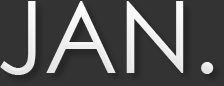
<style>
.page{position:relative;width:224px;height:86px;background:#333333}
.page>*{position:absolute;margin:0}
.t1{font:100px "CenturyGothic";color:#ffffff}
</style>
<div class="page">
<p class="t1" style="left:0px;top:1px;width:214px;height:74px">JAN.</p>
</div>
